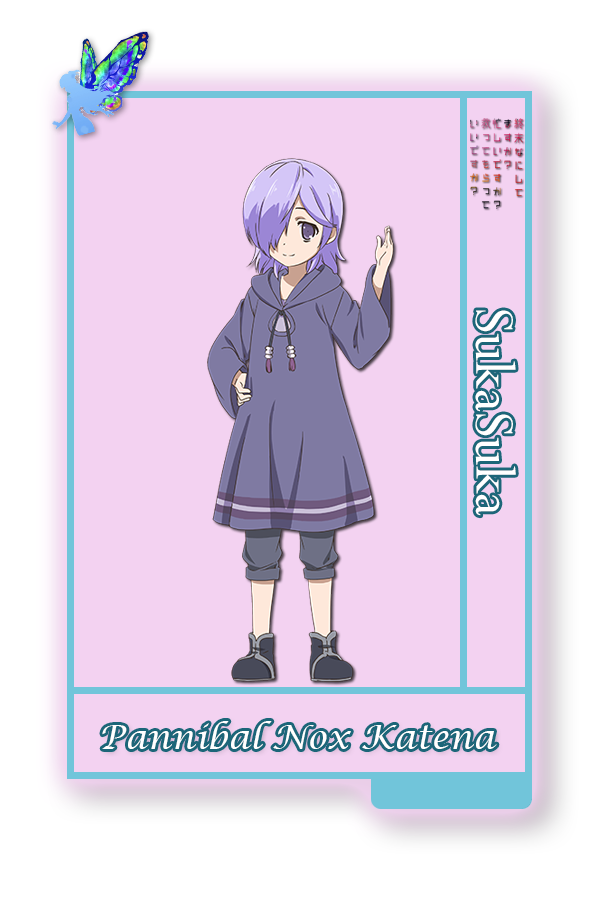
<style>
.page{position:relative;width:600px;height:900px;background:#f3d2f1}
.page>*{position:absolute;margin:0}
.t1{font:62.5px "Perpetua";color:#ffffff}
.t2{font:33.3px "LucidaCalligraphy-Italic";color:#ffffff}
</style>
<div class="page">
<p class="t1" style="left:475px;top:310px;width:41px;height:206px;rotate:90deg">SukaSuka</p>
<p class="t2" style="left:102px;top:721px;width:395px;height:28px">Pannibal Nox Katena</p>
</div>
